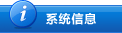
<style>
.page{position:relative;width:122px;height:33px}
.page>*{position:absolute;margin:0}
.t1{font:12px "MicrosoftYaHei";letter-spacing:0.075em;color:#ffffff}
</style>
<div class="page">
<p class="t1" style="left:46px;top:13px;width:50px;height:12px">系统信息</p>
</div>
